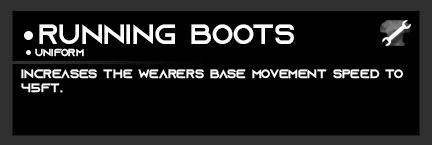
<style>
.page{position:relative;width:432px;height:145px;background:#000000}
.page>*{position:absolute;margin:0}
.t1{font:28px "AzonixRegular";color:#ffffff}
.t2{font:10px "AzonixRegular";color:#ffffff}
.t3{font:12px "AzonixRegular";color:#ffffff}
</style>
<div class="page">
<p class="t1" style="left:39px;top:24px;width:255px;height:20px">running boots</p>
<p class="t2" style="left:35px;top:48px;width:49px;height:9px">uniform</p>
<p class="t3" style="left:21px;top:69px;width:382px;height:24px">increases the wearers base movement speed to<br>45ft.</p>
</div>
